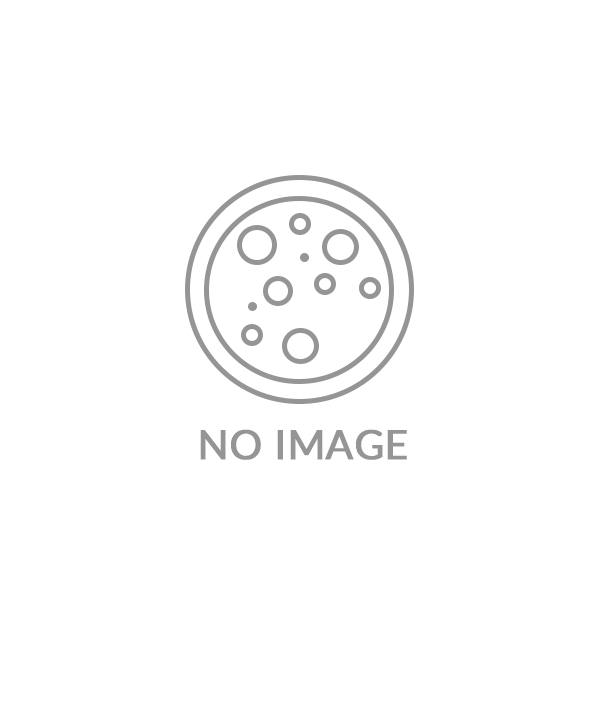
<style>
.page{position:relative;width:600px;height:719px;background:#ffffff}
.page>*{position:absolute;margin:0}
.t1{font:40.4px "Lato-Regular";color:#959595;text-transform:uppercase;font-weight:bold}
</style>
<div class="page">
<p class="t1" style="left:200px;top:429px;width:207px;height:31px">NO IMAGE</p>
</div>
